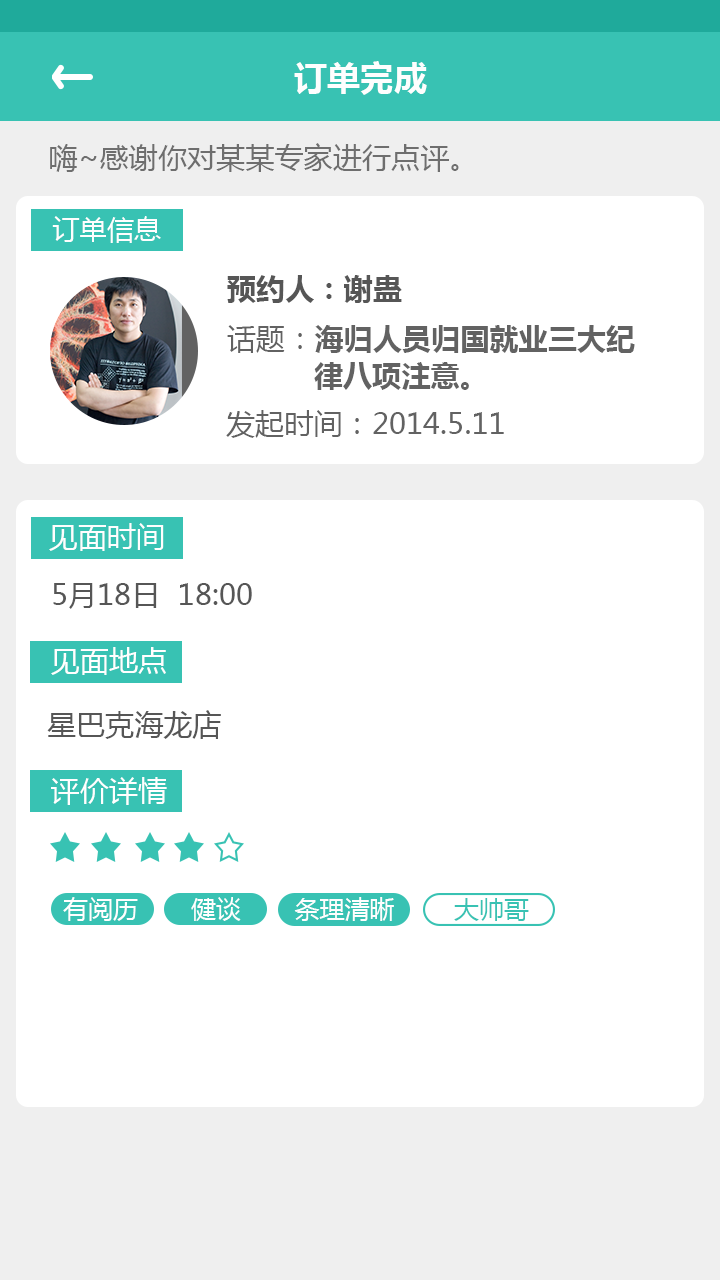
<style>
.page{position:relative;width:720px;height:1280px;background:#ffffff}
.page>*{position:absolute;margin:0}
.t1{font:33.3px "MicrosoftYaHei-Bold";color:#fefefe}
.t2{font:29.2px "MicrosoftYaHei";color:#6e6e6e}
.t3{font:27.1px "MicrosoftYaHei";color:#fefefe}
.t4{font:29.2px "MicrosoftYaHei-Bold";color:#565656}
.t5{font:29.2px/37.5px "MicrosoftYaHei-Bold";color:#626262}
.t6{font:29.2px/37.5px "MicrosoftYaHei";color:#626262}
.t7{font:29.2px "MicrosoftYaHei";color:#626262}
.t8{font:29.2px "MicrosoftYaHei";color:#fefefe}
.t9{font:29.2px "MicrosoftYaHei";color:#565656}
.t10{font:29.2px "MicrosoftYaHei";color:#ffffff}
.t11{font:25px "MicrosoftYaHei";color:#ffffff}
.t12{font:25px "MicrosoftYaHei";color:#fefefe}
.t13{font:25px "MicrosoftYaHei";color:#38c2b3}
</style>
<div class="page">
<p class="t1" style="left:294px;top:61px;width:133px;height:34px">订单完成</p>
<p class="t2" style="left:50px;top:143px;width:409px;height:29px">嗨~感谢你对某某专家进行点评。</p>
<p class="t3" style="left:52px;top:216px;width:109px;height:27px">订单信息</p>
<p class="t4" style="left:227px;top:275px;width:175px;height:28px">预约人：谢蛊</p>
<p class="t5" style="left:227px;top:325px;width:408px;height:65px"><span class="t6">话题：</span>海归人员归国就业三大纪<br>          律八项注意。</p>
<p class="t7" style="left:226px;top:410px;width:278px;height:28px">发起时间：2014.5.11</p>
<p class="t8" style="left:49px;top:523px;width:115px;height:28px">见面时间</p>
<p class="t9" style="left:53px;top:583px;width:199px;height:26px">5月18日  18:00</p>
<p class="t10" style="left:51px;top:647px;width:115px;height:28px">见面地点</p>
<p class="t9" style="left:47px;top:710px;width:174px;height:29px">星巴克海龙店</p>
<p class="t10" style="left:51px;top:777px;width:116px;height:28px">评价详情</p>
<p class="t11" style="left:63px;top:897px;width:75px;height:24px">有阅历</p>
<p class="t11" style="left:191px;top:897px;width:50px;height:24px">健谈</p>
<p class="t12" style="left:294px;top:897px;width:100px;height:24px">条理清晰</p>
<p class="t13" style="left:454px;top:898px;width:75px;height:23px">大帅哥</p>
</div>
